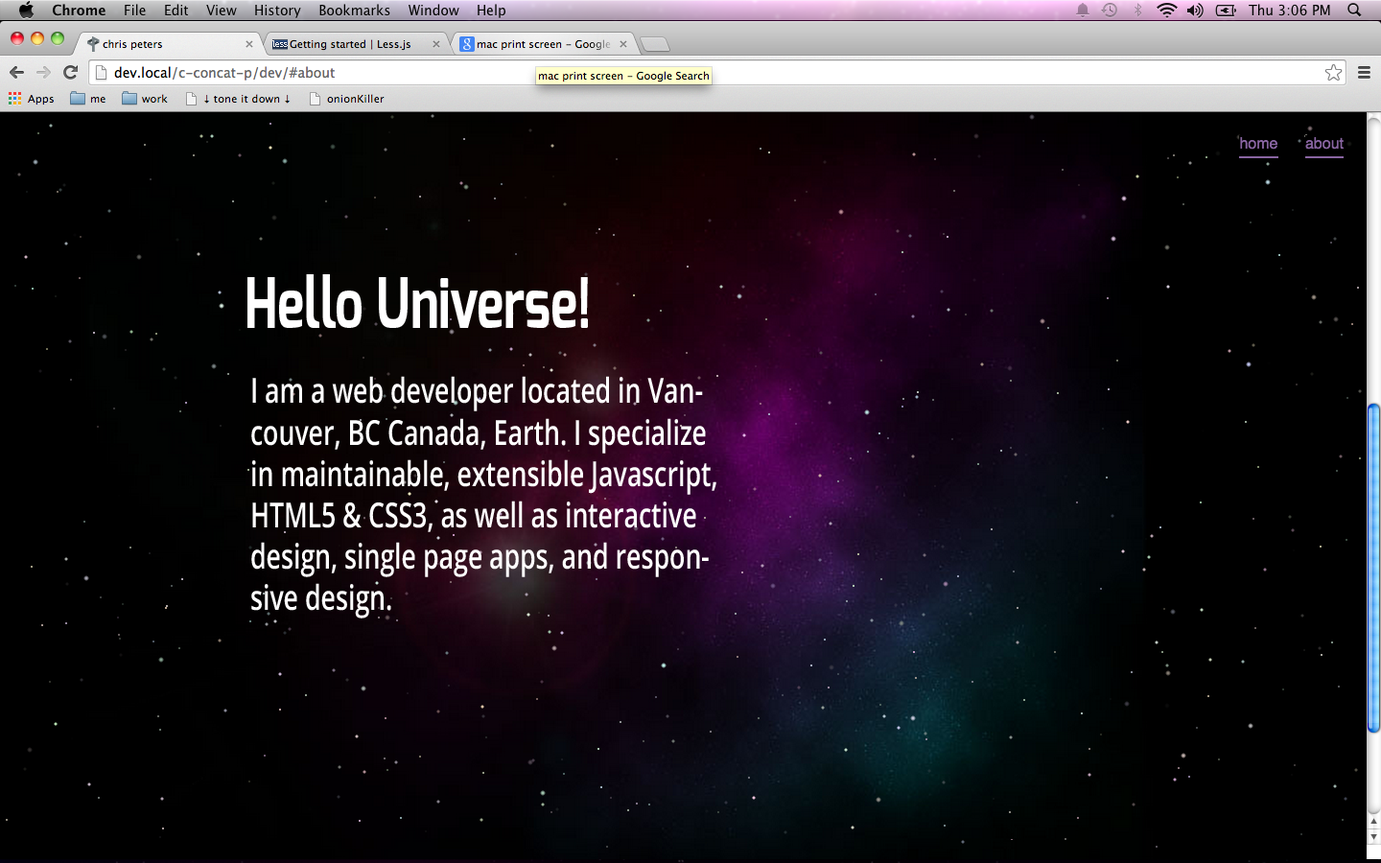
<style>
.page{position:relative;width:1381px;height:863px;background:#000000}
.page>*{position:absolute;margin:0}
.t1{font:69.1px "Exo-Bold";color:#ffffff;scale:0.74 1}
.t2{font:34.5px "OpenSans-Semibold";color:#ffffff;scale:0.74 1}
</style>
<div class="page">
<p class="t1" style="left:247px;top:274px;width:341px;height:54px">Hello Universe!</p>
<p class="t2" style="left:251px;top:376px;width:466px;height:243px">I am a web developer located in Vancouver, BC Canada, Earth. I specialize in maintainable, extensible Javascript, HTML5 &amp; CSS3, as well as interactive design, single page apps, and responsive design.</p>
</div>
